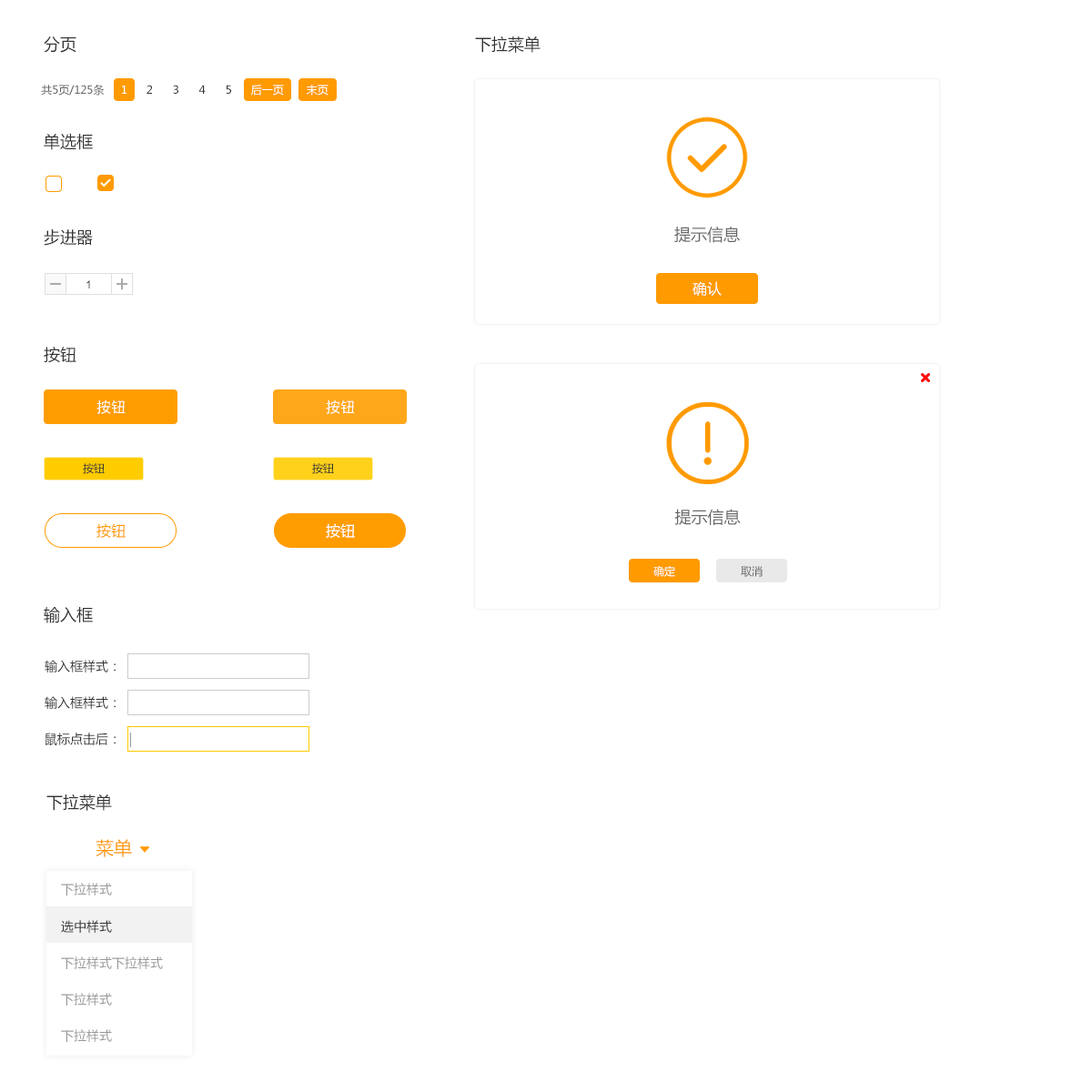
<style>
.page{position:relative;width:1092px;height:1092px;background:#ffffff}
.page>*{position:absolute;margin:0}
.t1{font:16.4px "MicrosoftYaHei";color:#333333}
.t2{font:10.9px "MicrosoftYaHei";color:#666666}
.t3{font:10.9px "MicrosoftYaHei";color:#ffffff}
.t4{font:10.9px "MicrosoftYaHei";color:#333333}
.t5{font:16.4px "MicrosoftYaHei";color:#666666}
.t6{font:10.9px "ArialMT"}
.t7{font:14.6px "MicrosoftYaHei";color:#ffffff}
.t8{font:14.6px "PingFang-SC-Medium";color:#ffffff}
.t9{font:14.6px "MicrosoftYaHei";color:#ff9d00}
.t10{font:14.6px "MicrosoftYaHei";color:#fffffe}
.t11{font:10.9px "MicrosoftYaHei";color:#fffefe}
.t12{font:12.7px "MicrosoftYaHei";color:#333333}
.t13{font:18.2px "MicrosoftYaHei";color:#ff9a00}
.t14{font:12.7px "MicrosoftYaHei";color:#999999}
</style>
<div class="page">
<p class="t1" style="left:44px;top:36px;width:32px;height:17px">分页</p>
<p class="t1" style="left:475px;top:36px;width:66px;height:17px">下拉菜单</p>
<p class="t2" style="left:41px;top:85px;width:64px;height:11px">共5页/125条</p>
<p class="t3" style="left:122px;top:85px;width:5px;height:9px">1</p>
<p class="t4" style="left:147px;top:85px;width:5px;height:9px">2</p>
<p class="t4" style="left:173px;top:85px;width:5px;height:9px">3</p>
<p class="t4" style="left:198px;top:85px;width:8px;height:9px">4</p>
<p class="t4" style="left:226px;top:85px;width:5px;height:9px">5</p>
<p class="t3" style="left:250px;top:85px;width:34px;height:11px">后一页</p>
<p class="t3" style="left:306px;top:85px;width:23px;height:11px">末页</p>
<p class="t1" style="left:44px;top:133px;width:49px;height:17px">单选框</p>
<p class="t1" style="left:44px;top:229px;width:49px;height:17px">步进器</p>
<p class="t5" style="left:674px;top:227px;width:66px;height:16px">提示信息</p>
<p class="t6" style="left:86px;top:280px;width:4px;height:8px">1</p>
<p class="t7" style="left:693px;top:281px;width:29px;height:16px">确认</p>
<p class="t1" style="left:44px;top:347px;width:32px;height:16px">按钮</p>
<p class="t8" style="left:96px;top:399px;width:30px;height:15px">按钮</p>
<p class="t8" style="left:326px;top:399px;width:29px;height:15px">按钮</p>
<p class="t4" style="left:83px;top:463px;width:22px;height:11px">按钮</p>
<p class="t4" style="left:312px;top:463px;width:22px;height:11px">按钮</p>
<p class="t5" style="left:674px;top:509px;width:67px;height:16px">提示信息</p>
<p class="t9" style="left:96px;top:523px;width:30px;height:15px">按钮</p>
<p class="t10" style="left:326px;top:523px;width:29px;height:15px">按钮</p>
<p class="t11" style="left:653px;top:566px;width:22px;height:11px">确定</p>
<p class="t2" style="left:741px;top:566px;width:22px;height:11px">取消</p>
<p class="t1" style="left:44px;top:607px;width:49px;height:16px">输入框</p>
<p class="t12" style="left:45px;top:660px;width:71px;height:12px">输入框样式：</p>
<p class="t12" style="left:45px;top:696px;width:71px;height:13px">输入框样式：</p>
<p class="t12" style="left:45px;top:733px;width:71px;height:13px">鼠标点击后：</p>
<p class="t1" style="left:46px;top:794px;width:66px;height:17px">下拉菜单</p>
<p class="t13" style="left:96px;top:839px;width:36px;height:18px">菜单</p>
<p class="t14" style="left:61px;top:883px;width:51px;height:12px">下拉样式</p>
<p class="t12" style="left:61px;top:920px;width:51px;height:13px">选中样式</p>
<p class="t14" style="left:61px;top:956px;width:102px;height:13px">下拉样式下拉样式</p>
<p class="t14" style="left:61px;top:993px;width:51px;height:13px">下拉样式</p>
<p class="t14" style="left:61px;top:1029px;width:51px;height:13px">下拉样式</p>
</div>
